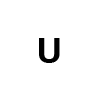
<style>
.page{position:relative;width:100px;height:100px;background:#ffffff}
.page>*{position:absolute;margin:0}
.t1{font:35px "OpenSans-Bold";color:#000000}
</style>
<div class="page">
<p class="t1" style="left:39px;top:38px;width:21px;height:25px">U</p>
</div>
